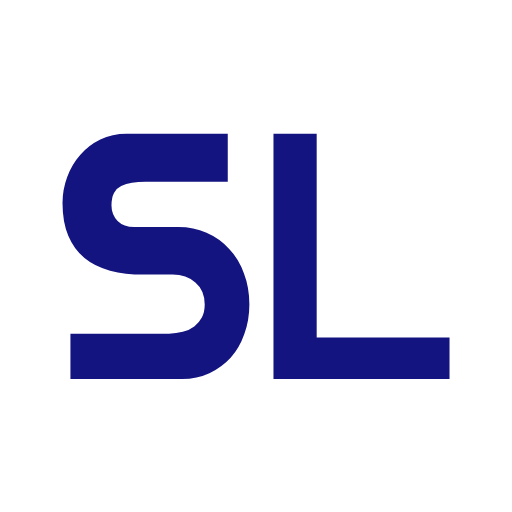
<style>
.page{position:relative;width:512px;height:512px;background:#ffffff}
.page>*{position:absolute;margin:0}
.t1{font:360px "DoHyeon-Regular";color:#131480}
</style>
<div class="page">
<p class="t1" style="left:62px;top:133px;width:388px;height:246px">SL</p>
</div>
